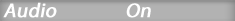
<style>
.page{position:relative;width:235px;height:21px;background:#b2b2b2}
.page>*{position:absolute;margin:0}
.t1{font:20px "MyriadPro-Regular";color:#ffffff;font-weight:bold;font-style:italic}
</style>
<div class="page">
<p class="t1" style="left:3px;top:2px;width:54px;height:16px">Audio</p>
<p class="t1" style="left:126px;top:3px;width:25px;height:15px">On</p>
</div>
